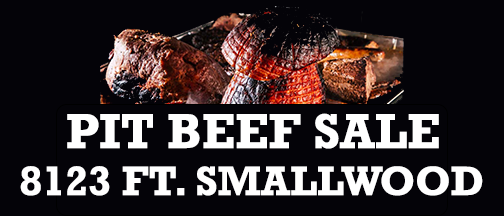
<style>
.page{position:relative;width:504px;height:216px;background:#040308}
.page>*{position:absolute;margin:0}
.t1{font:50px "Rockwell-Bold";color:#ffffff}
.t2{font:41.7px "Rockwell-Bold";color:#ffffff}
</style>
<div class="page">
<p class="t1" style="left:67px;top:113px;width:372px;height:36px">PIT BEEF SALE</p>
<p class="t2" style="left:20px;top:166px;width:463px;height:30px">8123 FT. SMALLWOOD</p>
</div>
